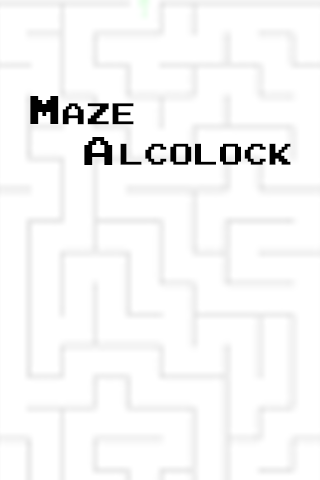
<style>
.page{position:relative;width:320px;height:480px;background:#ffffff}
.page>*{position:absolute;margin:0}
.t1{font:40px "JoystixMonospace-Regular";color:#000000}
.t2{font:30px "JoystixMonospace-Regular";color:#000000}
</style>
<div class="page">
<p class="t1" style="left:30px;top:96px;width:29px;height:28px">M</p>
<p class="t2" style="left:62px;top:103px;width:72px;height:22px">aze</p>
<p class="t1" style="left:84px;top:137px;width:29px;height:28px">A</p>
<p class="t2" style="left:120px;top:143px;width:171px;height:22px">lcolock</p>
</div>
